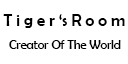
<style>
.page{position:relative;width:128px;height:64px;background:#ffffff}
.page>*{position:absolute;margin:0}
.t1{font:16.7px "BerlinSansFB-Reg";color:#000000}
.t2{font:12.5px "BerlinSansFB-Reg";color:#000000}
</style>
<div class="page">
<p class="t1" style="left:3px;top:14px;width:122px;height:14px">T i g e r ‘s R o o m</p>
<p class="t2" style="left:9px;top:40px;width:112px;height:9px">Creator Of The World</p>
</div>
